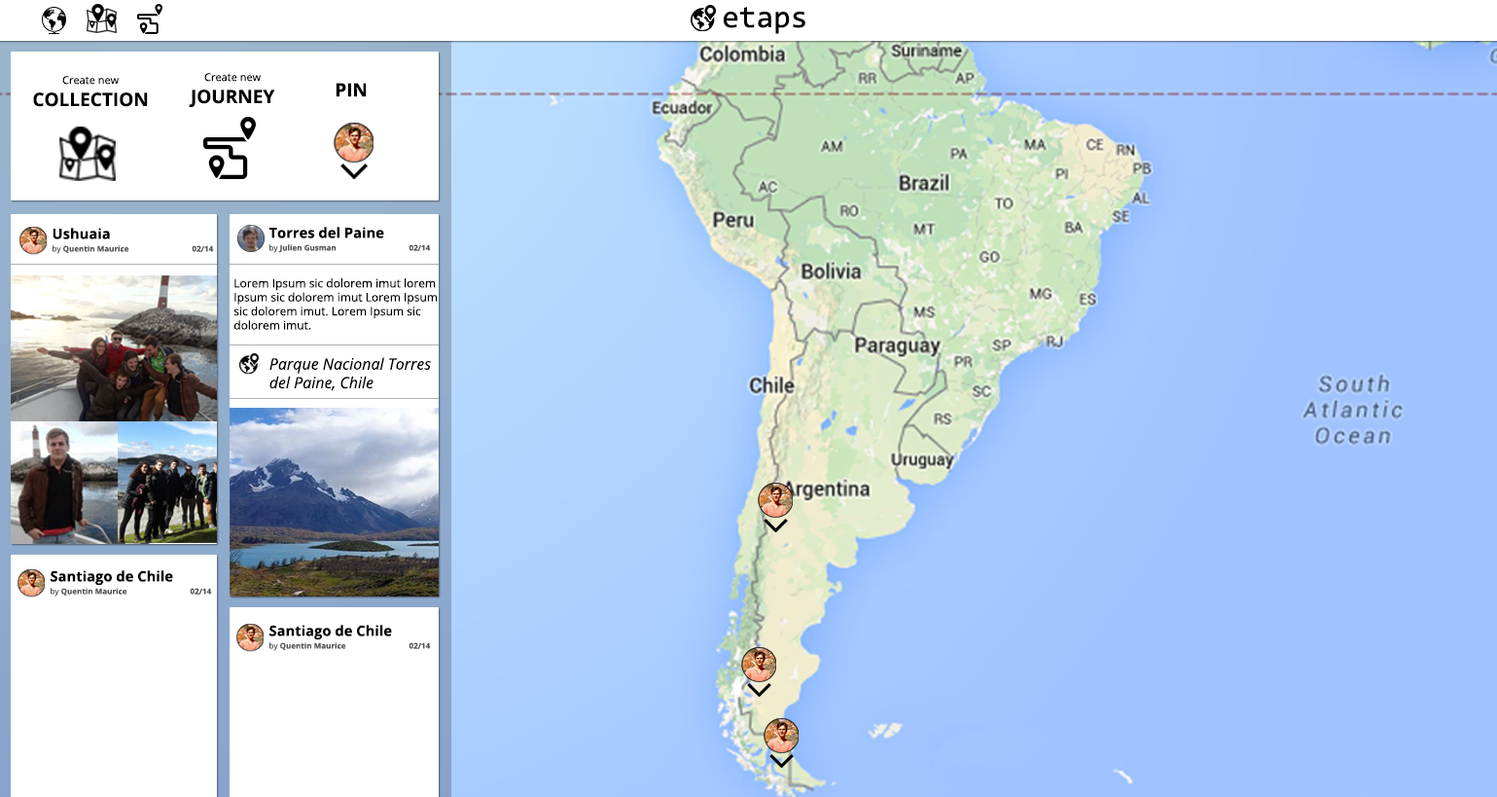
<style>
.page{position:relative;width:1497px;height:797px}
.page>*{position:absolute;margin:0}
.t1{font:30.9px "Consolas";color:#000000}
.t2{font:10.7px "OpenSans";color:#000000}
.t3{font:18.5px "OpenSans-Bold";color:#000000}
.t4{font:14.2px "OpenSans-Bold";color:#000000}
.t5{font:7.8px "OpenSans-Bold";color:#535252}
.t6{font:7.8px "OpenSans";color:#535252}
.t7{font:11.7px "OpenSans";color:#000000}
.t8{font:15.6px "OpenSans-Italic";color:#000000}
</style>
<div class="page">
<p class="t1" style="left:724px;top:7px;width:81px;height:27px">etaps</p>
<p class="t2" style="left:33px;top:76px;width:115px;height:31px;text-align:center">Create new<br><span class="t3">COLLECTION</span></p>
<p class="t2" style="left:189px;top:73px;width:86px;height:34px;text-align:center">Create new<br><span class="t3">JOURNEY</span></p>
<p class="t3" style="left:336px;top:83px;width:31px;height:14px">PIN</p>
<p class="t4" style="left:53px;top:228px;width:57px;height:11px">Ushuaia</p>
<p class="t4" style="left:268px;top:227px;width:116px;height:11px">Torres del Paine</p>
<p class="t5" style="left:53px;top:245px;width:161px;height:9px"><span class="t6">by </span>Quentin Maurice  02/14</p>
<p class="t5" style="left:269px;top:244px;width:162px;height:9px"><span class="t6">by </span>Julien Gusman   02/14</p>
<p class="t7" style="left:233px;top:278px;width:205px;height:52px">Lorem Ipsum sic dolorem imut lorem Ipsum sic dolorem imut Lorem Ipsum sic dolorem imut. Lorem Ipsum sic dolorem imut.</p>
<p class="t8" style="left:269px;top:357px;width:162px;height:34px">Parque Nacional Torres <br>del Paine, Chile</p>
<p class="t4" style="left:51px;top:570px;width:122px;height:16px">Santiago de Chile</p>
<p class="t5" style="left:51px;top:587px;width:161px;height:9px"><span class="t6">by </span>Quentin Maurice  02/14</p>
<p class="t4" style="left:269px;top:624px;width:123px;height:16px">Santiago de Chile</p>
<p class="t5" style="left:269px;top:642px;width:162px;height:9px"><span class="t6">by </span>Quentin Maurice  02/14</p>
</div>
